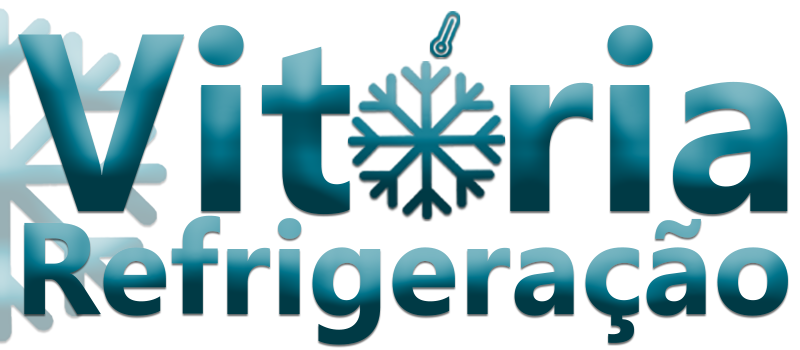
<style>
.page{position:relative;width:800px;height:350px;background:#ffffff}
.page>*{position:absolute;margin:0}
.t1{font:252.4px "MyanmarText-Bold"}
.t2{font:130.1px "MyanmarText-Bold"}
</style>
<div class="page">
<p class="t1" style="left:18px;top:25px;width:770px;height:190px">Vit  ria</p>
<p class="t2" style="left:24px;top:215px;width:764px;height:130px">Refrigeração</p>
</div>
